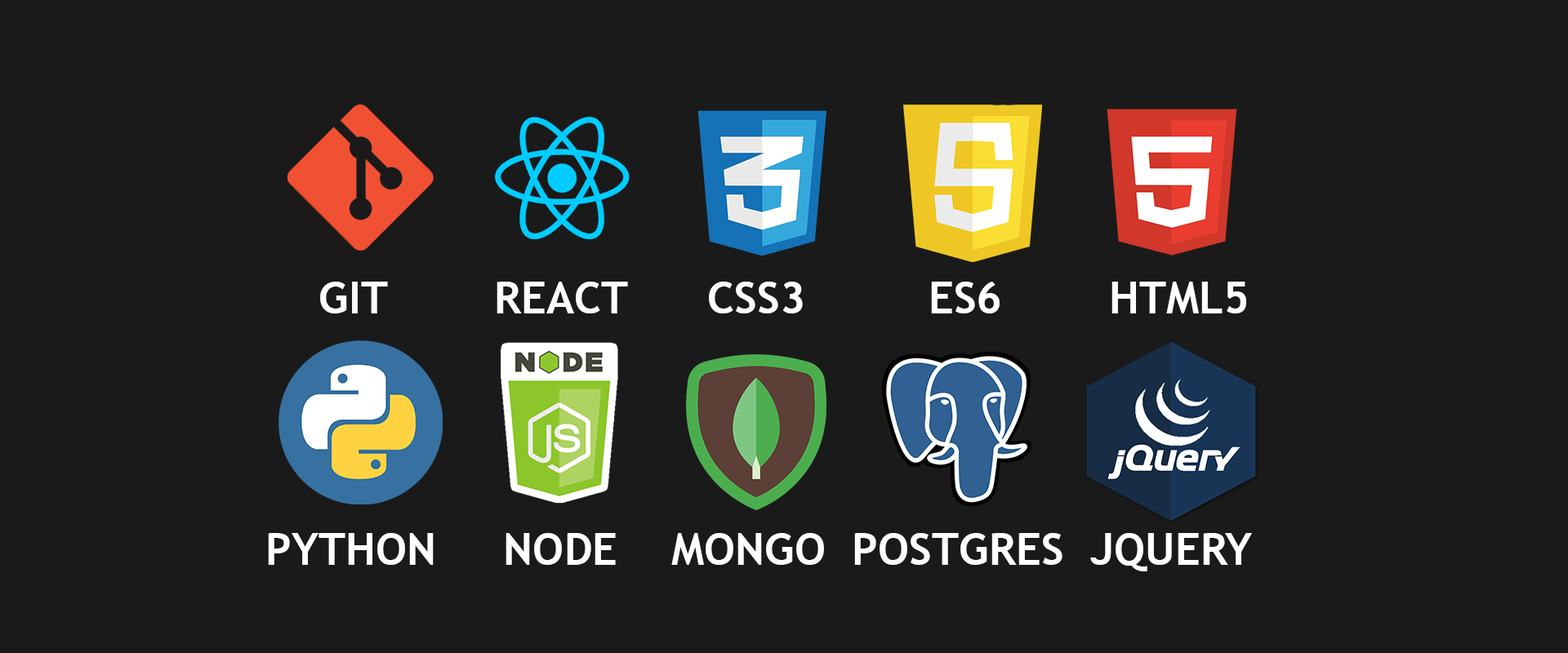
<style>
.page{position:relative;width:1568px;height:653px;background:#1a1a1a}
.page>*{position:absolute;margin:0}
.t1{font:44.3px "TrebuchetMS-Bold";color:#ffffff}
</style>
<div class="page">
<p class="t1" style="left:320px;top:282px;width:926px;height:32px">GIT        REACT      CSS3        ES6        HTML5</p>
<p class="t1" style="left:268px;top:533px;width:984px;height:39px">PYTHON     NODE    MONGO  POSTGRES  JQUERY</p>
</div>
